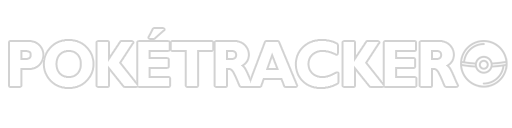
<style>
.page{position:relative;width:512px;height:128px;background:#ffffff}
.page>*{position:absolute;margin:0}
.t1{font:64px "GillSansMT-Bold";letter-spacing:-0.05em;color:#ffffff;scale:0.96 1}
</style>
<div class="page">
<p class="t1" style="left:10px;top:29px;width:448px;height:58px">POKÉTRACKER</p>
</div>
